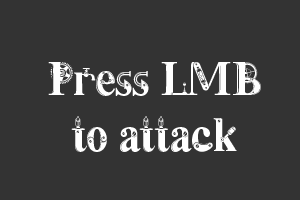
<style>
.page{position:relative;width:300px;height:200px;background:#333333}
.page>*{position:absolute;margin:0}
.t1{font:47px "Steamy";letter-spacing:-0.04em;color:#ffffff}
</style>
<div class="page">
<p class="t1" style="left:48px;top:62px;width:213px;height:90px;text-align:center">Press LMB<br>to attack</p>
</div>
